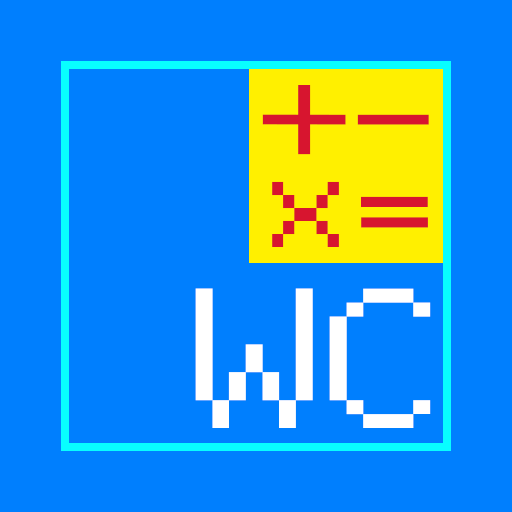
<style>
.page{position:relative;width:512px;height:512px;background:#007ffe}
.page>*{position:absolute;margin:0}
.t1{font:157.9px "FreePixel-Regular";color:#d7152f;scale:1.2 1}
.t2{font:104px "FreePixel-Regular";color:#d7152f;scale:1.71 1}
.t3{font:163.4px "FreePixel-Regular";color:#d7152f;scale:1.09 1}
.t4{font:222.9px "FreePixel-Regular";color:#ffffff;scale:1.2 1}
</style>
<div class="page">
<p class="t1" style="left:262px;top:85px;width:167px;height:70px">+-</p>
<p class="t2" style="left:272px;top:181px;width:67px;height:66px">X</p>
<p class="t3" style="left:361px;top:196px;width:67px;height:32px">=</p>
<p class="t4" style="left:195px;top:288px;width:236px;height:140px">WC</p>
</div>
